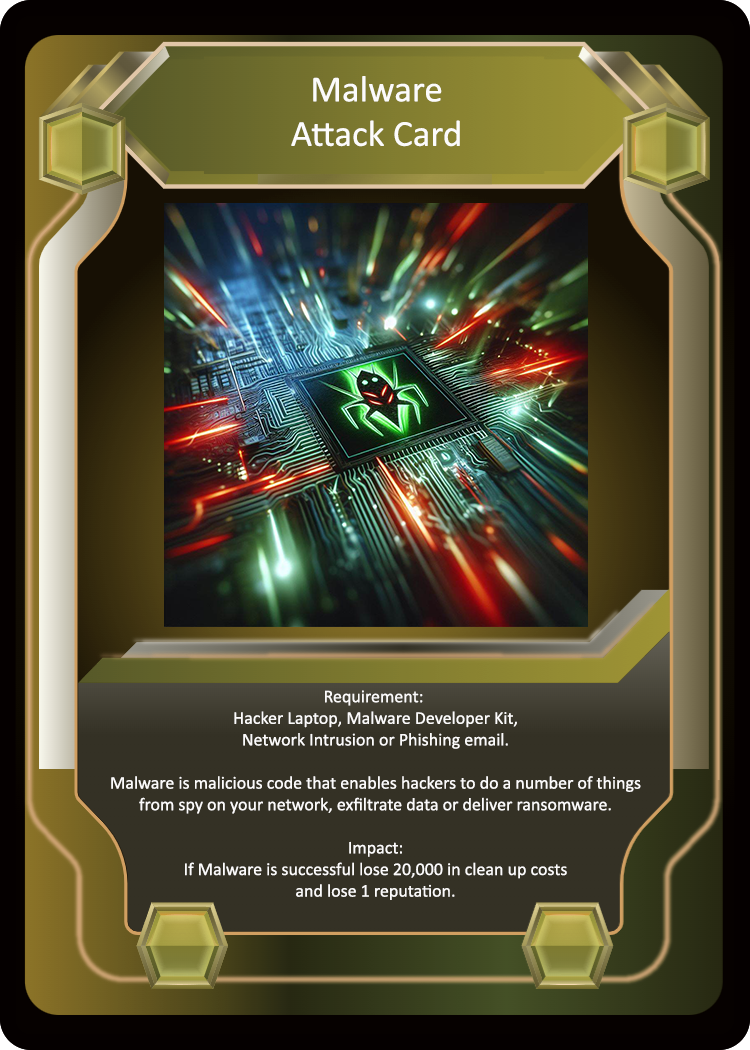
<style>
.page{position:relative;width:750px;height:1050px}
.page>*{position:absolute;margin:0}
.t1{font:37px "Calibri";color:#fcfbfb}
.t2{font:18px "Calibri";color:#fcfbfb}
</style>
<div class="page">
<p class="t1" style="left:291px;top:76px;width:169px;height:71px;text-align:center">Malware<br>Attack Card</p>
<p class="t2" style="left:111px;top:690px;width:530px;height:210px;text-align:center">Requirement: <br>Hacker Laptop, Malware Developer Kit,<br>Network Intrusion or Phishing email.<br><br>Malware is malicious code that enables hackers to do a number of things<br>from spy on your network, exfiltrate data or deliver ransomware.<br><br>Impact:<br>If Malware is successful lose 20,000 in clean up costs<br>and lose 1 reputation.</p>
</div>
